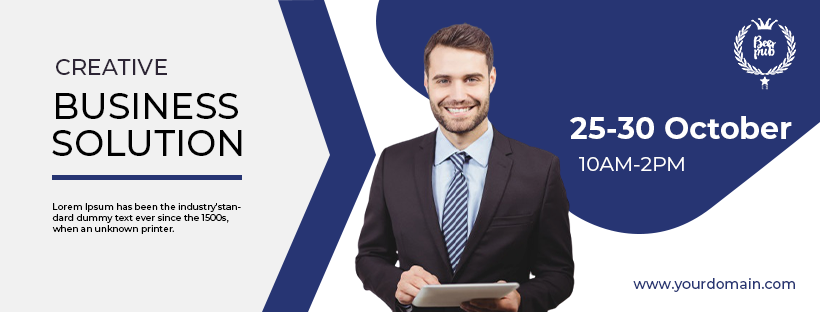
<style>
.page{position:relative;width:820px;height:312px;background:#f1f1f1}
.page>*{position:absolute;margin:0}
.t1{font:22px "Montserrat-Medium";color:#2d2535}
.t2{font:36px "Montserrat-Medium";color:#000000}
.t3{font:30px "Montserrat-Bold";color:#ffffff}
.t4{font:20px "Montserrat-Regular";color:#ffffff}
.t5{font:9px "Montserrat-Medium";color:#000000}
.t6{font:14px "Montserrat-Medium";color:#273573}
</style>
<div class="page">
<p class="t1" style="left:56px;top:59px;width:111px;height:16px">CREATIVE</p>
<p class="t2" style="left:56px;top:93px;width:182px;height:26px">BUSINESS</p>
<p class="t3" style="left:570px;top:116px;width:222px;height:23px">25-30 October</p>
<p class="t2" style="left:52px;top:130px;width:190px;height:26px">SOLUTION</p>
<p class="t4" style="left:579px;top:157px;width:105px;height:14px">10AM-2PM</p>
<p class="t5" style="left:52px;top:203px;width:189px;height:31px">Lorem Ipsum has been the industry'standard dummy text ever since the 1500s, when an unknown printer.</p>
<p class="t6" style="left:633px;top:278px;width:162px;height:14px">www.yourdomain.com</p>
</div>
